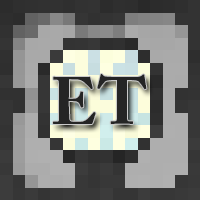
<style>
.page{position:relative;width:200px;height:200px}
.page>*{position:absolute;margin:0}
.t1{font:66.7px "ACaslonPro-Bold";color:#252525}
</style>
<div class="page">
<p class="t1" style="left:53px;top:74px;width:94px;height:50px">ET</p>
</div>
